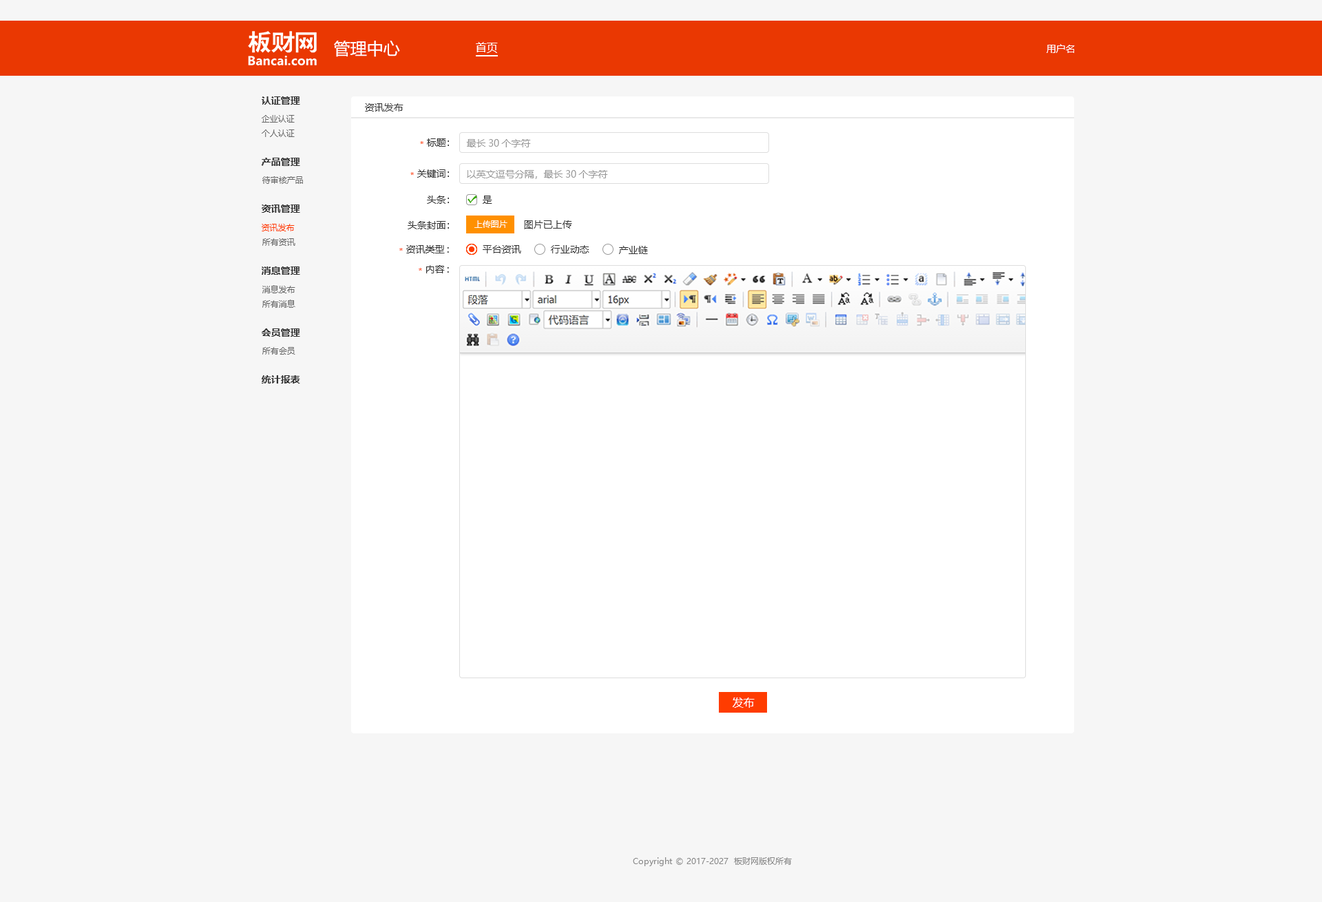
<style>
.page{position:relative;width:1322px;height:902px;background:#f6f6f6}
.page>*{position:absolute;margin:0}
.t1{font:16.5px "MicrosoftYaHei";color:#ffffff}
.t2{font:11px "MicrosoftYaHei";color:#ffffff}
.t3{font:9.6px "MicrosoftYaHei";color:#ffffff}
.t4{font:9.6px "MicrosoftYaHei-Bold";color:#333333}
.t5{font:9.6px "MicrosoftYaHei";color:#333333}
.t6{font:8.3px "MicrosoftYaHei";color:#666666}
.t7{font:8.3px "MicrosoftYaHei";color:#ff3c00}
.t8{font:9.6px "MicrosoftYaHei";color:#999999}
.t9{font:8.3px "MicrosoftYaHei";color:#fffefe}
.t10{font:11px "MicrosoftYaHei";color:#fffefe}
.t11{font:8.3px "MicrosoftYaHei";color:#888888}
</style>
<div class="page">
<p class="t1" style="left:334px;top:41px;width:66px;height:16px">管理中心</p>
<p class="t2" style="left:476px;top:42px;width:22px;height:11px">首页</p>
<p class="t3" style="left:1047px;top:44px;width:28px;height:9px">用户名</p>
<p class="t4" style="left:262px;top:96px;width:38px;height:9px">认证管理</p>
<p class="t5" style="left:365px;top:103px;width:38px;height:9px">资讯发布</p>
<p class="t6" style="left:262px;top:115px;width:33px;height:8px">企业认证</p>
<p class="t6" style="left:262px;top:129px;width:33px;height:8px">个人认证</p>
<p class="t7" style="left:420px;top:141px;width:3px;height:3px">*</p>
<p class="t5" style="left:427px;top:138px;width:22px;height:9px">标题：</p>
<p class="t8" style="left:466px;top:139px;width:65px;height:8px">最长30个字符</p>
<p class="t4" style="left:261px;top:158px;width:39px;height:8px">产品管理</p>
<p class="t7" style="left:410px;top:172px;width:4px;height:3px">*</p>
<p class="t5" style="left:417px;top:169px;width:32px;height:9px">关键词：</p>
<p class="t8" style="left:467px;top:170px;width:141px;height:9px">以英文逗号分隔，最长30个字符</p>
<p class="t6" style="left:262px;top:176px;width:41px;height:8px">待审核产品</p>
<p class="t5" style="left:427px;top:196px;width:22px;height:8px">头条：</p>
<p class="t5" style="left:483px;top:196px;width:9px;height:8px">是</p>
<p class="t4" style="left:262px;top:204px;width:38px;height:9px">资讯管理</p>
<p class="t5" style="left:408px;top:221px;width:41px;height:8px">头条封面：</p>
<p class="t9" style="left:474px;top:220px;width:33px;height:8px">上传图片</p>
<p class="t5" style="left:524px;top:220px;width:48px;height:9px">图片已上传</p>
<p class="t7" style="left:262px;top:224px;width:33px;height:7px">资讯发布</p>
<p class="t6" style="left:262px;top:238px;width:33px;height:8px">所有资讯</p>
<p class="t5" style="left:406px;top:245px;width:43px;height:8px">资讯类型:</p>
<p class="t5" style="left:483px;top:245px;width:38px;height:8px">平台资讯</p>
<p class="t5" style="left:551px;top:245px;width:38px;height:8px">行业动态</p>
<p class="t5" style="left:619px;top:246px;width:29px;height:8px">产业链</p>
<p class="t7" style="left:399px;top:248px;width:4px;height:3px">*</p>
<p class="t4" style="left:262px;top:266px;width:38px;height:9px">消息管理</p>
<p class="t7" style="left:419px;top:268px;width:3px;height:3px">*</p>
<p class="t5" style="left:426px;top:265px;width:23px;height:8px">内容:</p>
<p class="t6" style="left:262px;top:285px;width:33px;height:8px">消息发布</p>
<p class="t6" style="left:262px;top:300px;width:33px;height:8px">所有消息</p>
<p class="t4" style="left:262px;top:328px;width:38px;height:9px">会员管理</p>
<p class="t6" style="left:262px;top:347px;width:33px;height:8px">所有会员</p>
<p class="t4" style="left:262px;top:375px;width:38px;height:9px">统计报表</p>
<p class="t10" style="left:733px;top:697px;width:22px;height:11px">发布</p>
<p class="t11" style="left:633px;top:857px;width:159px;height:9px">Copyright © 2017-2027  板财网版权所有</p>
</div>
